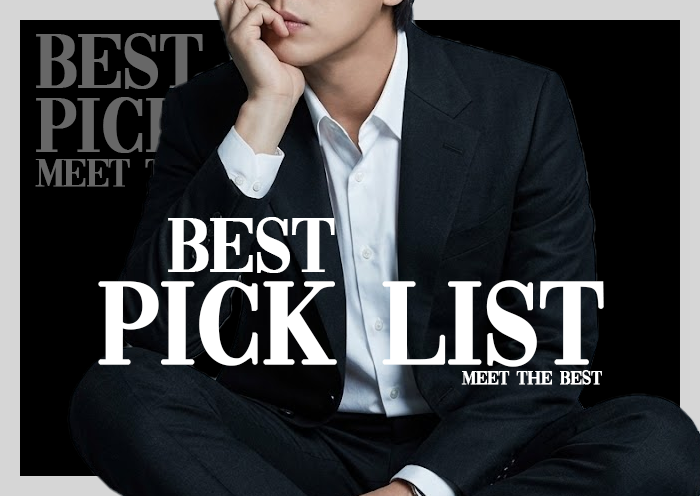
<style>
.page{position:relative;width:700px;height:496px;background:#000000}
.page>*{position:absolute;margin:0}
.t1{font:80px "Vogue-Regular";letter-spacing:-0.025em;color:#676767;font-weight:bold}
.t2{font:80px "Vogue-Regular";letter-spacing:-0.025em;color:#ffffff;font-weight:bold}
.t3{font:120px "Vogue-Regular";letter-spacing:-0.025em;color:#ffffff;font-weight:bold}
.t4{font:20px "Vogue-Regular";letter-spacing:-0.025em;color:#ffffff;font-weight:bold}
</style>
<div class="page">
<p class="t1" style="left:36px;top:33px;width:167px;height:56px">BEST</p>
<p class="t2" style="left:168px;top:217px;width:167px;height:56px">BEST</p>
<p class="t3" style="left:98px;top:280px;width:506px;height:87px">Pick List</p>
<p class="t4" style="left:461px;top:370px;width:141px;height:15px">Meet the best</p>
</div>
